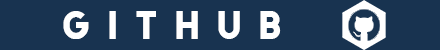
<style>
.page{position:relative;width:440px;height:50px;background:#183350}
.page>*{position:absolute;margin:0}
.t1{font:37.5px "TheNextFont";letter-spacing:0.48em;color:#ffffff}
</style>
<div class="page">
<p class="t1" style="left:63px;top:11px;width:218px;height:28px">GITHUB</p>
</div>
